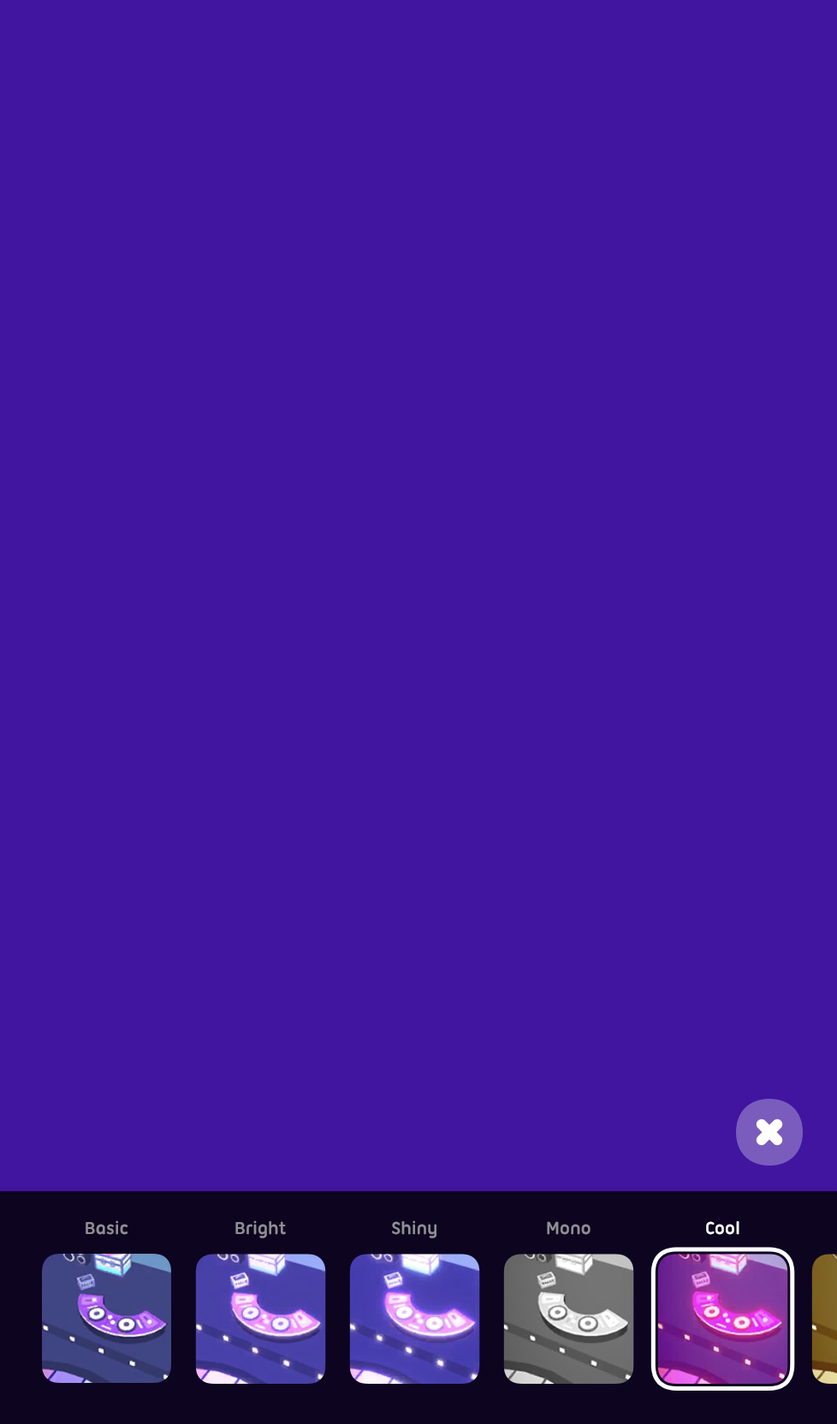
<style>
.page{position:relative;width:837px;height:1424px;background:#4115a0}
.page>*{position:absolute;margin:0}
.t1{font:18.8px "UbuntuTitling-Bold";letter-spacing:-0.025em;color:#908e94}
.t2{font:18.8px "UbuntuTitling-Bold";letter-spacing:-0.025em;color:#ffffff}
</style>
<div class="page">
<p class="t1" style="left:86px;top:1221px;width:42px;height:14px">Basic</p>
<p class="t1" style="left:235px;top:1221px;width:51px;height:18px">Bright</p>
<p class="t1" style="left:392px;top:1221px;width:45px;height:18px">Shiny</p>
<p class="t1" style="left:547px;top:1222px;width:44px;height:13px">Mono</p>
<p class="t2" style="left:706px;top:1222px;width:34px;height:13px">Cool</p>
</div>
